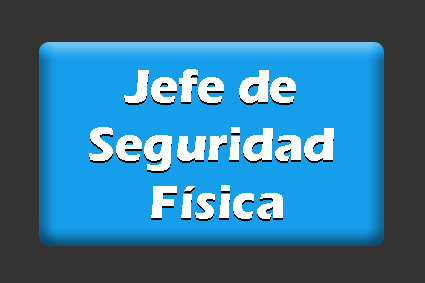
<style>
.page{position:relative;width:425px;height:283px;background:#333333}
.page>*{position:absolute;margin:0}
.t1{font:48px "ErasITC-Bold";color:#ffffff}
</style>
<div class="page">
<p class="t1" style="left:89px;top:69px;width:245px;height:150px;text-align:center">Jefe de <br>Seguridad <br>Física</p>
</div>
